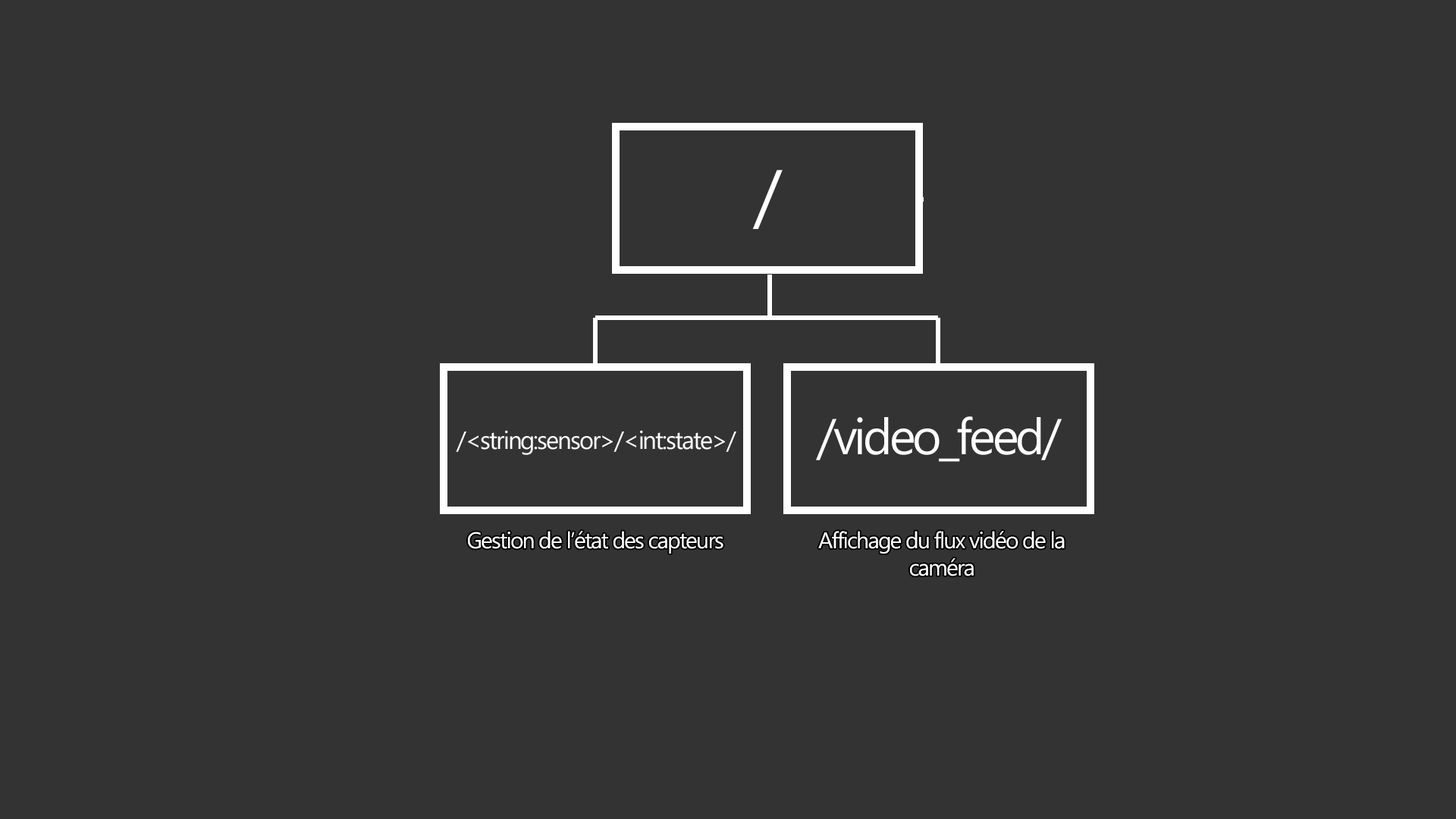
<style>
.page{position:relative;width:1456px;height:819px;background:#333333}
.page>*{position:absolute;margin:0}
.t1{font:72.3px "Gadugi";letter-spacing:-0.06em;color:#ffffff}
.t2{font:50.2px "Gadugi";letter-spacing:-0.06em;color:#ffffff}
.t3{font:25.1px "Gadugi";letter-spacing:-0.06em;color:#ffffff}
.t4{font:22.7px "Gadugi";letter-spacing:-0.06em;color:#ffffff}
</style>
<div class="page">
<p class="t1" style="left:752px;top:170px;width:31px;height:59px">/</p>
<p class="t2" style="left:816px;top:416px;width:246px;height:46px">/video_feed/</p>
<p class="t3" style="left:456px;top:430px;width:280px;height:25px">/&lt;string:sensor&gt;/&lt;int:state&gt;/</p>
<p class="t4" style="left:468px;top:531px;width:255px;height:23px">Gestion de l’état des capteurs</p>
<p class="t4" style="left:818px;top:531px;width:247px;height:45px;text-align:center">Affichage du flux vidéo de la caméra</p>
</div>
